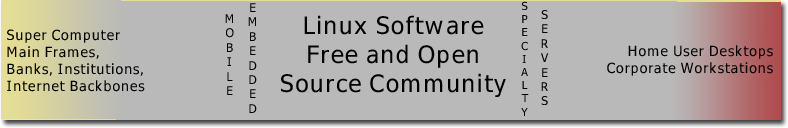
<style>
.page{position:relative;width:788px;height:128px;background:#b9b9b9}
.page>*{position:absolute;margin:0}
.t1{font:12px "WineTahomaBold";color:#000000}
.t2{font:11px "WineTahomaBold";color:#000000}
.t3{font:24px "WineTahomaBold";color:#000000}
.t4{font:14px "WineTahomaBold";color:#000000}
</style>
<div class="page">
<p class="t1" style="left:248px;top:3px;width:9px;height:110px;text-align:center">E<br>M<br>B<br>E<br>D<br>D<br>E<br>D</p>
<p class="t2" style="left:521px;top:1px;width:8px;height:115px;text-align:center">S<br>P<br>E<br>C<br>I<br>A<br>L<br>T<br>Y</p>
<p class="t1" style="left:225px;top:14px;width:9px;height:81px;text-align:center">M<br>O<br>B<br>I<br>L<br>E</p>
<p class="t3" style="left:281px;top:15px;width:225px;height:82px;text-align:center">Linux Software<br>Free and Open <br>Source Community</p>
<p class="t1" style="left:541px;top:10px;width:8px;height:95px;text-align:center">S<br>E<br>R<br>V<br>E<br>R<br>S</p>
<p class="t4" style="left:7px;top:29px;width:138px;height:63px">Super Computer<br>Main Frames,<br>Banks, Institutions,<br>Internet Backbones</p>
<p class="t4" style="left:607px;top:45px;width:166px;height:31px;text-align:right">Home User Desktops<br>Corporate Workstations</p>
</div>
